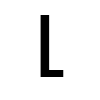
<style>
.page{position:relative;width:100px;height:100px;background:#ffffff}
.page>*{position:absolute;margin:0}
.t1{font:100px "TwCenMT-Condensed";color:#000000}
</style>
<div class="page">
<p class="t1" style="left:40px;top:15px;width:24px;height:62px">L</p>
</div>
